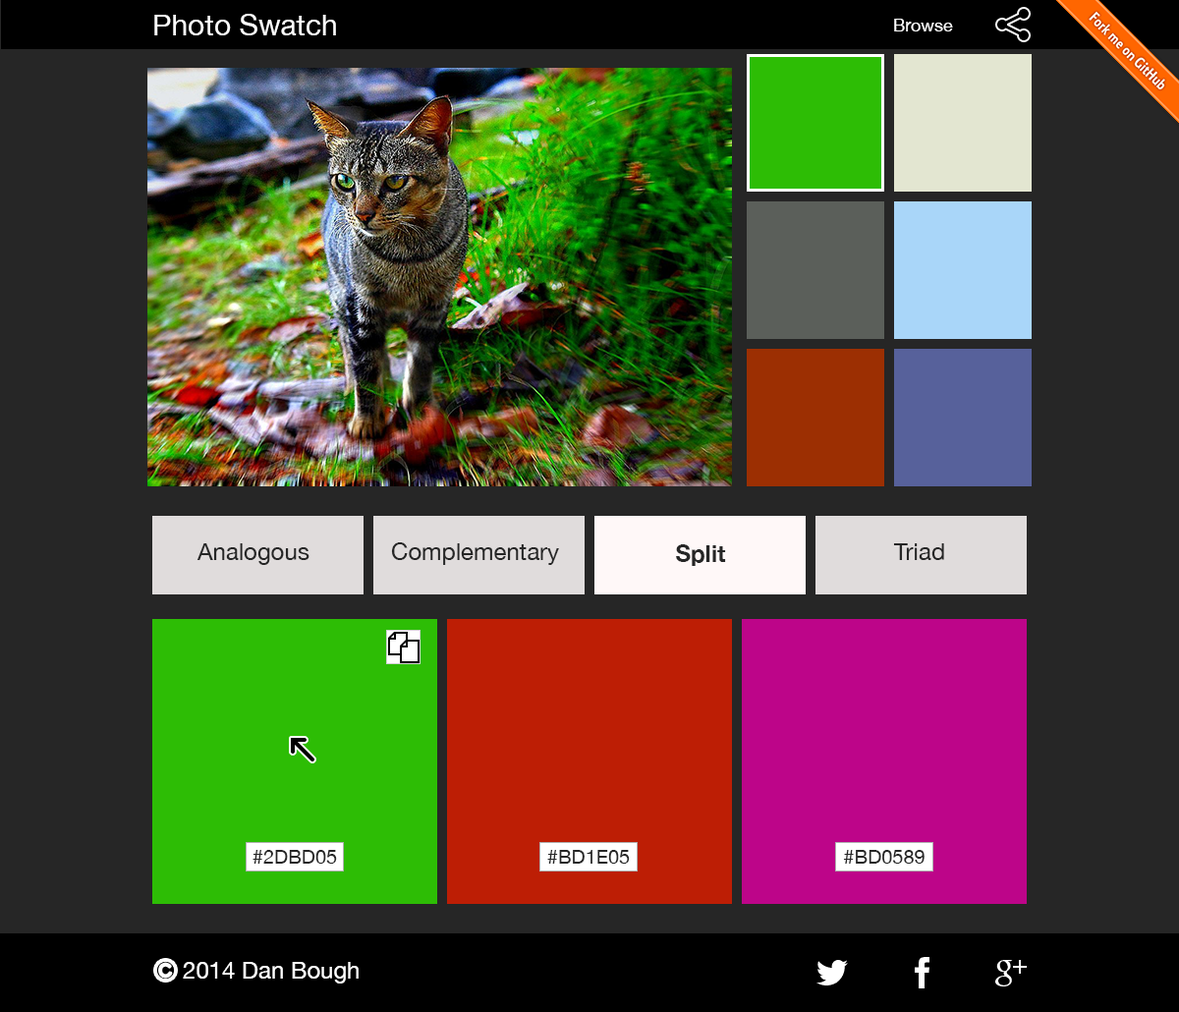
<style>
.page{position:relative;width:1179px;height:1012px;background:#262626}
.page>*{position:absolute;margin:0}
.t1{font:29.5px "HelveticaNeue";color:#fefefe}
.t2{font:17.7px "HelveticaNeue";color:#fefefe}
.t3{font:23.6px "HelveticaNeue";color:#262626}
.t4{font:23.6px "HelveticaNeue-Bold";color:#262626}
.t5{font:19.6px "HelveticaNeue";color:#262626}
.t6{font:23.6px "HelveticaNeue";color:#fefefe}
</style>
<div class="page">
<p class="t1" style="left:154px;top:14px;width:182px;height:21px">Photo Swatch</p>
<p class="t2" style="left:894px;top:19px;width:59px;height:12px">Browse</p>
<p class="t3" style="left:196px;top:543px;width:113px;height:22px">Analogous</p>
<p class="t3" style="left:391px;top:542px;width:168px;height:23px">Complementary</p>
<p class="t4" style="left:676px;top:544px;width:50px;height:22px">Split</p>
<p class="t3" style="left:893px;top:543px;width:51px;height:17px">Triad</p>
<p class="t5" style="left:252px;top:850px;width:85px;height:13px">#2DBD05</p>
<p class="t5" style="left:547px;top:850px;width:83px;height:13px">#BD1E05</p>
<p class="t5" style="left:843px;top:850px;width:81px;height:13px">#BD0589</p>
<p class="t6" style="left:183px;top:962px;width:176px;height:21px">2014 Dan Bough</p>
</div>
